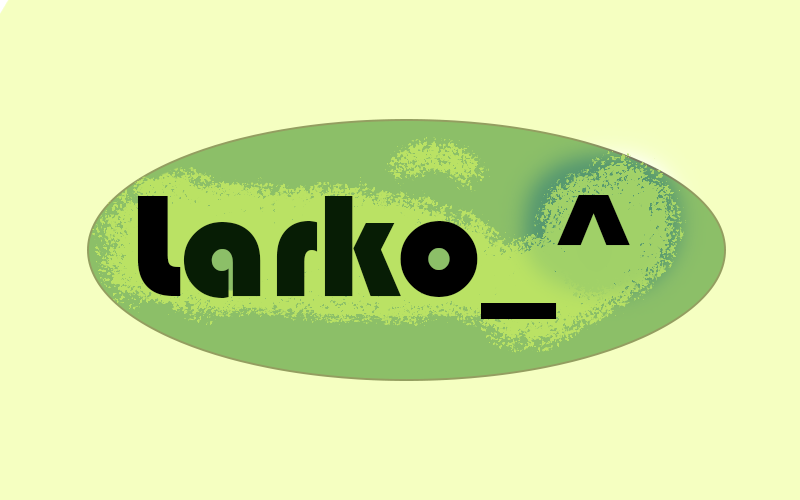
<style>
.page{position:relative;width:800px;height:500px;background:#f5ffc1}
.page>*{position:absolute;margin:0}
.t1{font:150px "Bauhaus93";color:#071d05}
.t2{font:150px "Bauhaus93";color:#000000}
</style>
<div class="page">
<p class="t1" style="left:137px;top:195px;width:493px;height:124px"><span class="t2">L</span>ark<span class="t2">o_^</span></p>
</div>
